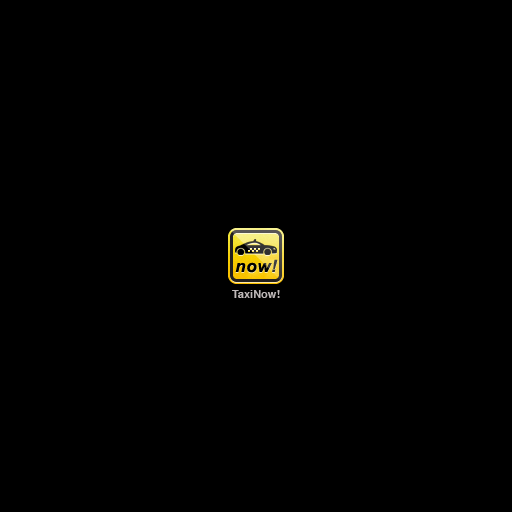
<style>
.page{position:relative;width:512px;height:512px;background:#000000}
.page>*{position:absolute;margin:0}
.t1{font:17px "Arial-BoldItalicMT";letter-spacing:0.04em;color:#000000}
.t2{font:11px "Helvetica-Bold";color:#bfb9b9}
</style>
<div class="page">
<p class="t1" style="left:235px;top:259px;width:43px;height:14px">now!</p>
<p class="t2" style="left:232px;top:290px;width:48px;height:8px">TaxiNow!</p>
</div>
